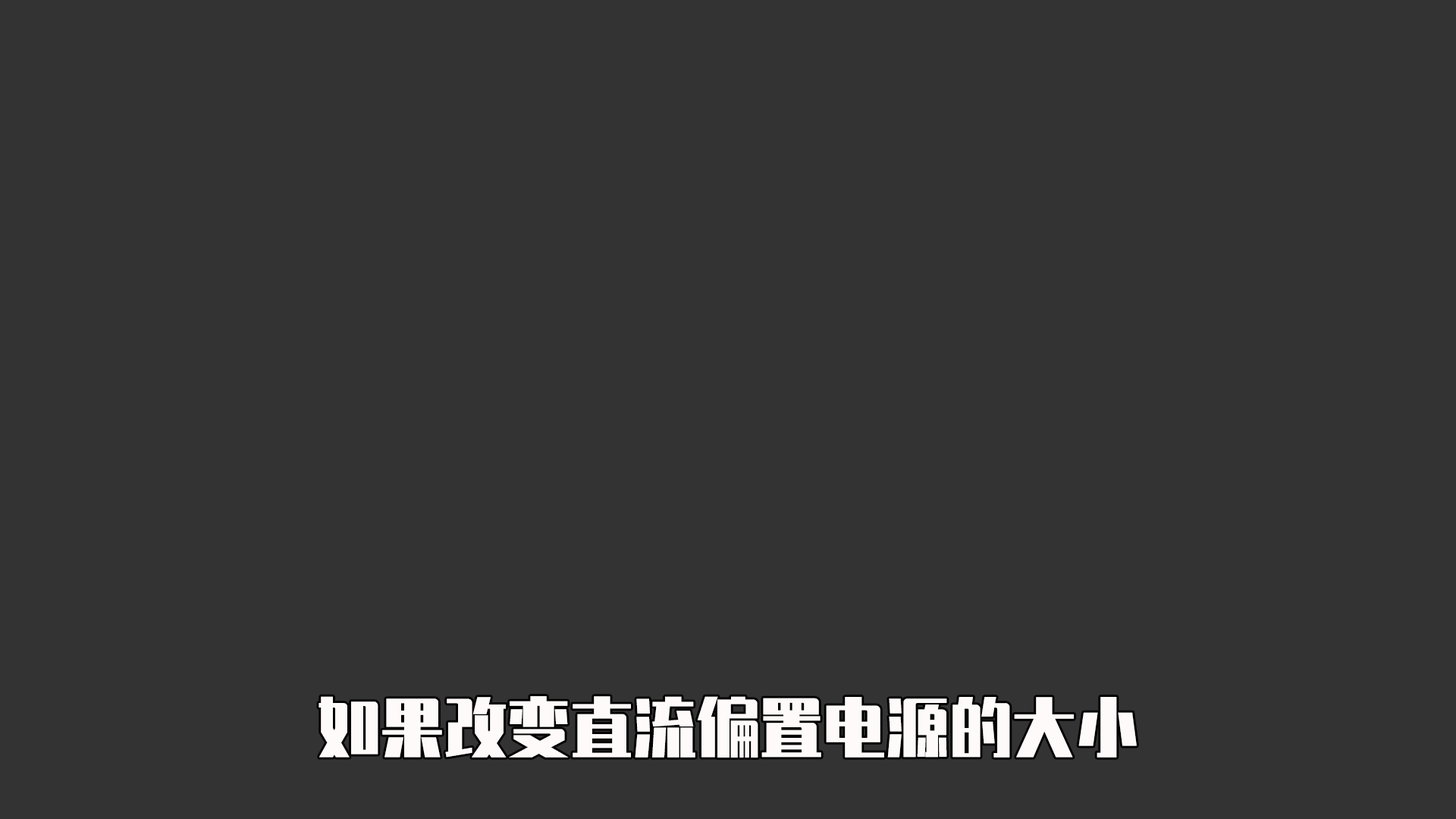
<style>
.page{position:relative;width:1456px;height:819px;background:#333333}
.page>*{position:absolute;margin:0}
.t1{font:63.2px "ZhenyanGB-Regular";color:#fefafa}
</style>
<div class="page">
<p class="t1" style="left:318px;top:696px;width:819px;height:62px">如果改变直流偏置电源的大小</p>
</div>
